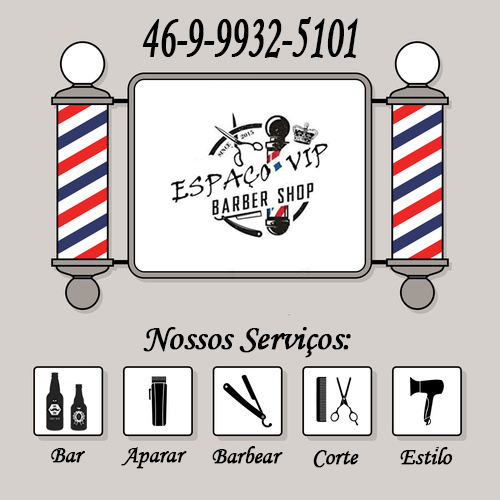
<style>
.page{position:relative;width:500px;height:500px;background:#d5d0cc}
.page>*{position:absolute;margin:0}
.t1{font:61.9px "MonotypeCorsiva";letter-spacing:-0.025em;color:#000000;font-weight:bold;scale:0.62 1}
.t2{font:36px "MonotypeCorsiva";letter-spacing:-0.025em;color:#000000;font-weight:bold}
.t3{font:24px "MonotypeCorsiva";letter-spacing:-0.025em;color:#000000;font-weight:bold}
</style>
<div class="page">
<p class="t1" style="left:142px;top:17px;width:216px;height:41px">46-9-9932-5101</p>
<p class="t2" style="left:143px;top:327px;width:208px;height:31px">Nossos Serviços:</p>
<p class="t3" style="left:51px;top:448px;width:34px;height:15px">Bar</p>
<p class="t3" style="left:121px;top:447px;width:66px;height:22px">Aparar</p>
<p class="t3" style="left:212px;top:446px;width:71px;height:18px">Barbear</p>
<p class="t3" style="left:400px;top:447px;width:53px;height:18px">Estilo</p>
<p class="t3" style="left:313px;top:450px;width:46px;height:18px">Corte</p>
</div>
